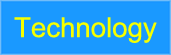
<style>
.page{position:relative;width:171px;height:55px;background:#1a99ff}
.page>*{position:absolute;margin:0}
.t1{font:27.5px "ArialMT";color:#f6ff00}
</style>
<div class="page">
<p class="t1" style="left:14px;top:17px;width:143px;height:26px">Technology</p>
</div>
